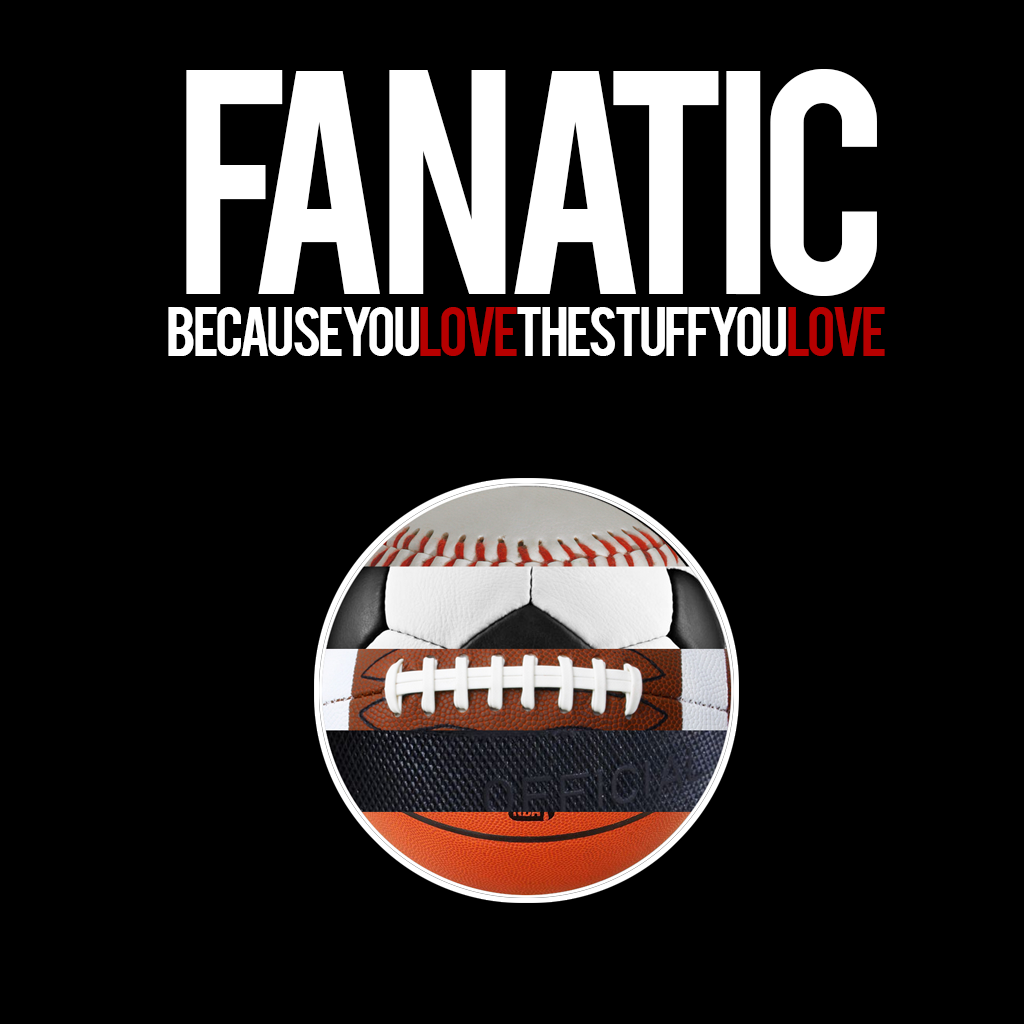
<style>
.page{position:relative;width:1024px;height:1024px;background:#000000}
.page>*{position:absolute;margin:0}
.t1{font:250px "Bebas";letter-spacing:-0.075em;color:#ffffff}
.t2{font:55px "Bebas";letter-spacing:-0.075em;color:#ffffff}
.t3{font:55px "Bebas";letter-spacing:-0.075em;color:#b60000}
</style>
<div class="page">
<p class="t1" style="left:186px;top:69px;width:691px;height:227px">FANATIC</p>
<p class="t2" style="left:168px;top:307px;width:717px;height:49px">BECAUSE YOU <span class="t3">LOVE</span>THESTUFFYOU<span class="t3">LOVE</span></p>
</div>
